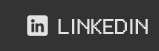
<style>
.page{position:relative;width:159px;height:51px;background:#333333}
.page>*{position:absolute;margin:0}
.t1{font:19.6px "Cubic_11";color:#e2e2e2;font-variant:small-caps;font-weight:bold}
</style>
<div class="page">
<p class="t1" style="left:58px;top:19px;width:90px;height:15px">LINKEDIN</p>
</div>
